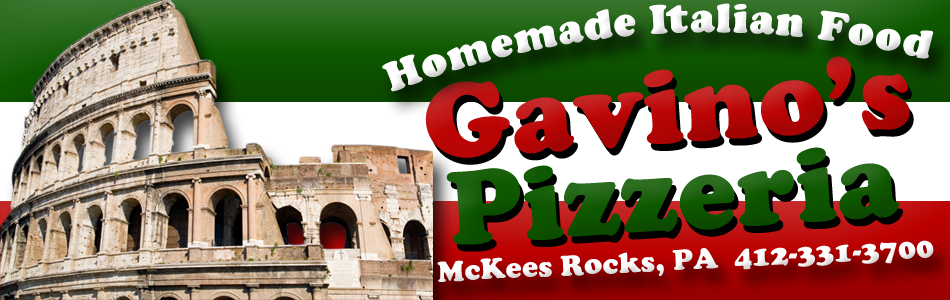
<style>
.page{position:relative;width:950px;height:300px}
.page>*{position:absolute;margin:0}
.t1{font:43.5px "CooperBlack";letter-spacing:0.01em;color:#ffffff}
.t2{font:109.4px/87.5px "CooperBlack";letter-spacing:0.01em;color:#bc0404}
.t3{font:109.4px/87.5px "CooperBlack";letter-spacing:0.01em;color:#0e5800}
.t4{font:30px "CooperBlack";letter-spacing:0.01em;color:#ffffff}
</style>
<div class="page">
<p class="t1" style="left:382px;top:3px;width:552px;height:89px;rotate:-3deg">Homemade Italian Food</p>
<p class="t2" style="left:425px;top:56px;width:485px;height:189px;text-align:center;rotate:-4deg">Gavino’s<br><span class="t3">Pizzeria</span></p>
<p class="t4" style="left:437px;top:240px;width:497px;height:42px;rotate:-3deg">McKees Rocks, PA  412- 331-3700</p>
</div>
